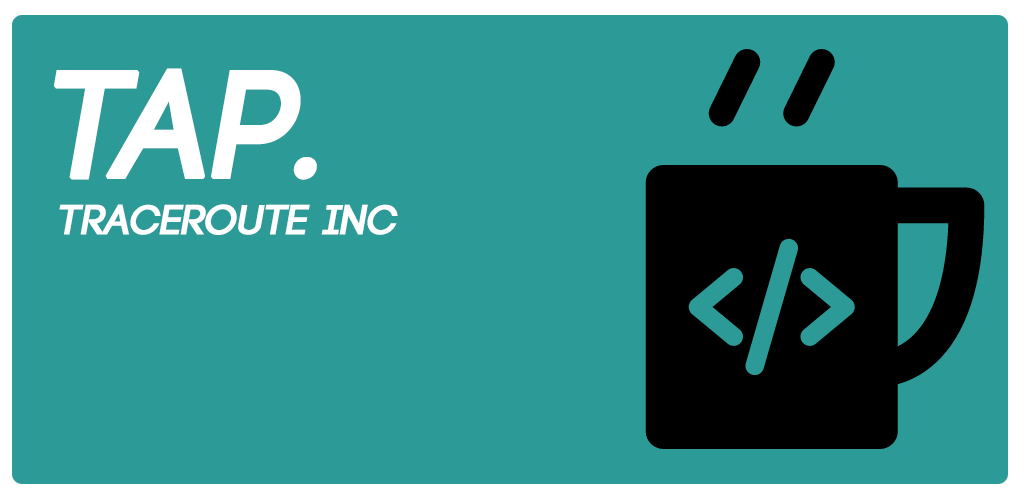
<style>
.page{position:relative;width:1024px;height:500px;background:#2c9b98}
.page>*{position:absolute;margin:0}
.t1{font:150px "Code-Bold";color:#ffffff;font-weight:bold;font-style:italic}
.t2{font:41.7px "Code-Bold";color:#ffffff;text-transform:uppercase;font-weight:bold;font-style:italic}
</style>
<div class="page">
<p class="t1" style="left:54px;top:68px;width:263px;height:112px">tap.</p>
<p class="t2" style="left:59px;top:204px;width:339px;height:31px">traceroute inc</p>
</div>
